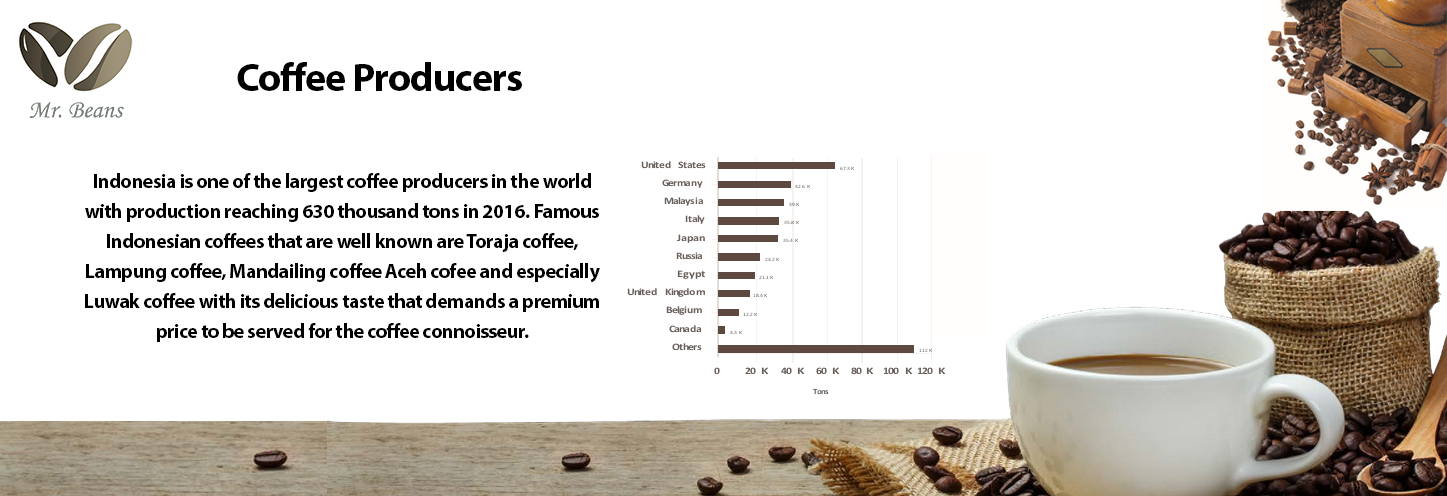
<style>
.page{position:relative;width:1447px;height:496px;background:#ffffff}
.page>*{position:absolute;margin:0}
.t1{font:40px "MyriadPro-Bold";letter-spacing:-0.025em;color:#000000}
.t2{font:20px/30px "MyriadPro-Bold";letter-spacing:-0.025em;color:#000000}
</style>
<div class="page">
<p class="t1" style="left:237px;top:62px;width:285px;height:29px">Coffee Producers</p>
<p class="t2" style="left:85px;top:173px;width:515px;height:169px;text-align:center">Indonesia is one of the largest coffee producers in the world with production reaching 630 thousand tons in 2016. Famous Indonesian coffees that are well known are Toraja coffee, Lampung coffee, Mandailing coffee Aceh cofee and especially Luwak coffee with its delicious taste that demands a premium price to be served for the coffee connoisseur.</p>
</div>
